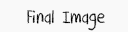
<style>
.page{position:relative;width:128px;height:32px;background:#f9f9f9}
.page>*{position:absolute;margin:0}
.t1{font:20px "DKCrayonCrumble";color:#000000}
</style>
<div class="page">
<p class="t1" style="left:27px;top:10px;width:78px;height:21px">Final Image</p>
</div>
